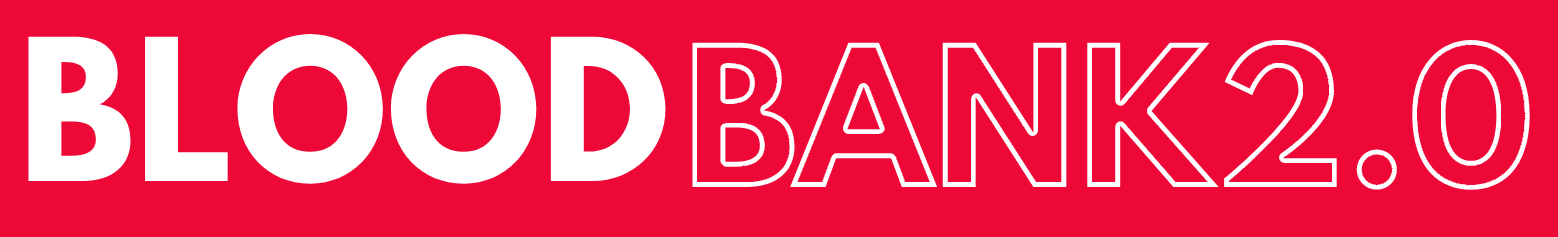
<style>
.page{position:relative;width:1558px;height:237px;background:#ed0838}
.page>*{position:absolute;margin:0}
.t1{font:175px "LeagueSpartan-Bold";color:#ffffff}
.t2{font:175px "LeagueSpartan-Bold";color:#ed0838}
</style>
<div class="page">
<p class="t1" style="left:28px;top:34px;width:638px;height:150px">BLOOD</p>
<p class="t2" style="left:692px;top:40px;width:838px;height:150px">BANK2.0</p>
</div>
